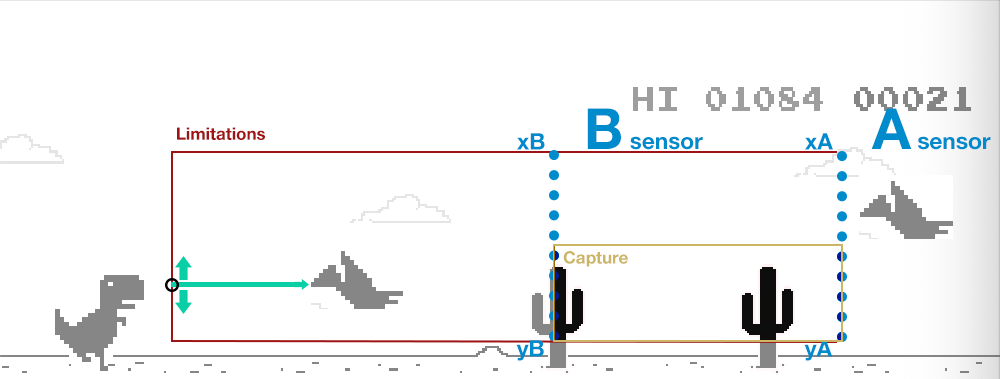
<style>
.page{position:relative;width:1000px;height:379px;background:#ffffff}
.page>*{position:absolute;margin:0}
.t1{font:22.7px "HelveticaNeue-Bold";color:#008bcc}
.t2{font:56.7px "HelveticaNeue-Bold";color:#008bcc}
.t3{font:17px "HelveticaNeue-Bold";color:#9e1313}
.t4{font:17px "HelveticaNeue-Bold";color:#cdb566}
</style>
<div class="page">
<p class="t1" style="left:587px;top:108px;width:116px;height:42px"><span class="t2">B</span> sensor</p>
<p class="t1" style="left:871px;top:108px;width:120px;height:42px"><span class="t2">A</span> sensor</p>
<p class="t3" style="left:177px;top:127px;width:88px;height:13px">Limitations</p>
<p class="t1" style="left:517px;top:133px;width:28px;height:17px">xB</p>
<p class="t1" style="left:805px;top:133px;width:28px;height:17px">xA</p>
<p class="t4" style="left:563px;top:251px;width:65px;height:16px">Capture</p>
<p class="t1" style="left:516px;top:340px;width:28px;height:21px">yB</p>
<p class="t1" style="left:804px;top:340px;width:29px;height:21px">yA</p>
</div>
